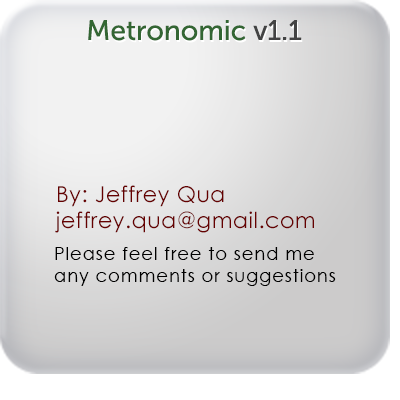
<style>
.page{position:relative;width:400px;height:400px}
.page>*{position:absolute;margin:0}
.t1{font:28px "MuseoSans-500";color:#336633}
.t2{font:28px "MuseoSans-500";color:#434343}
.t3{font:22px "CenturyGothic";letter-spacing:0.025em;color:#660000}
.t4{font:18px "CenturyGothic";letter-spacing:0.05em;color:#000000}
</style>
<div class="page">
<p class="t1" style="left:88px;top:20px;width:214px;height:21px">Metronomic <span class="t2">v1.1</span></p>
<p class="t3" style="left:55px;top:185px;width:259px;height:48px">By: Jeffrey Qua<br>jeffrey.qua@gmail.com</p>
<p class="t4" style="left:54px;top:247px;width:282px;height:39px">Please feel free to send me<br>any comments or suggestions</p>
</div>
